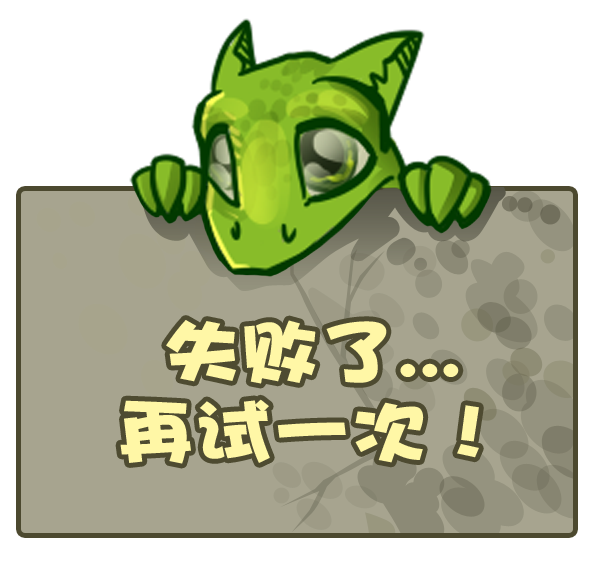
<style>
.page{position:relative;width:600px;height:570px;background:#ffffff}
.page>*{position:absolute;margin:0}
.t1{font:70.2px/80px "DFPHaiBaoW12";color:#fff7a6;scale:1.11 1}
</style>
<div class="page">
<p class="t1" style="left:120px;top:320px;width:359px;height:144px;text-align:center">失败了...<br>再试一次！</p>
</div>
